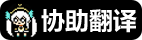
<style>
.page{position:relative;width:142px;height:40px;background:#000000}
.page>*{position:absolute;margin:0}
.t1{font:24px "MicrosoftYaHei-Bold";color:#ffffff}
</style>
<div class="page">
<p class="t1" style="left:41px;top:9px;width:96px;height:24px">协助翻译</p>
</div>
